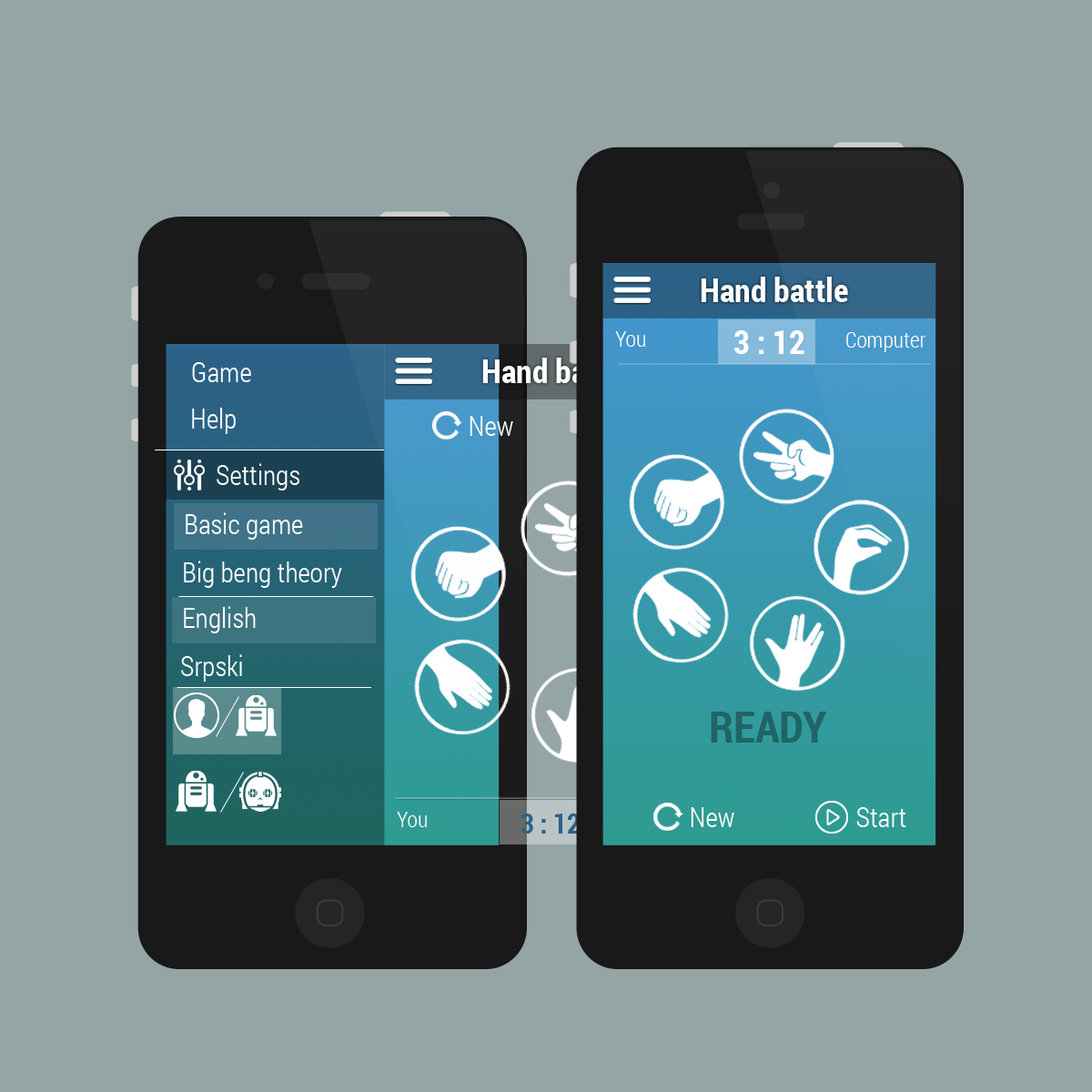
<style>
.page{position:relative;width:1092px;height:1092px;background:#95a5a6}
.page>*{position:absolute;margin:0}
.t1{font:32.8px "RobotoCondensed-Bold";color:#ffffff}
.t2{font:21.8px "RobotoCondensed-Light";color:#ffffff}
.t3{font:27.3px "RobotoCondensed-Light";color:#ffffff}
.t4{font:43.7px "RobotoCondensed-Bold";color:#206466}
.t5{font:27.3px "RobotoCondensed-Bold";color:#2c6187}
</style>
<div class="page">
<p class="t1" style="left:701px;top:277px;width:147px;height:25px">Hand battle</p>
<p class="t2" style="left:615px;top:331px;width:30px;height:16px">You</p>
<p class="t1" style="left:734px;top:330px;width:70px;height:24px">3 : 12</p>
<p class="t2" style="left:846px;top:332px;width:80px;height:20px">Computer</p>
<p class="t3" style="left:192px;top:362px;width:59px;height:20px">Game</p>
<p class="t1" style="left:482px;top:358px;width:148px;height:25px">Hand battle</p>
<p class="t3" style="left:192px;top:408px;width:44px;height:26px">Help</p>
<p class="t3" style="left:470px;top:416px;width:43px;height:20px">New</p>
<p class="t3" style="left:217px;top:463px;width:82px;height:27px">Settings</p>
<p class="t3" style="left:186px;top:512px;width:117px;height:28px">Basic game</p>
<p class="t3" style="left:184px;top:561px;width:158px;height:27px">Big beng theory</p>
<p class="t3" style="left:184px;top:606px;width:72px;height:27px">English</p>
<p class="t3" style="left:181px;top:654px;width:61px;height:28px">Srpski</p>
<p class="t4" style="left:711px;top:712px;width:116px;height:31px">READY</p>
<p class="t3" style="left:691px;top:807px;width:43px;height:20px">New</p>
<p class="t3" style="left:856px;top:807px;width:50px;height:20px">Start</p>
<p class="t2" style="left:397px;top:812px;width:30px;height:15px">You</p>
<p class="t5" style="left:521px;top:814px;width:59px;height:20px">3 : 12</p>
</div>
